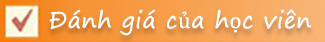
<style>
.page{position:relative;width:325px;height:42px}
.page>*{position:absolute;margin:0}
.t1{font:22.7px "SegoePrint";letter-spacing:0.025em;color:#ffffff}
.t2{font:22.7px "Cambria";letter-spacing:0.025em;color:#ffffff}
</style>
<div class="page">
<p class="t1" style="left:49px;top:9px;width:263px;height:27px">Đánh giá c<span class="t2">ủ</span>a h<span class="t2">ọ</span>c viên</p>
</div>
